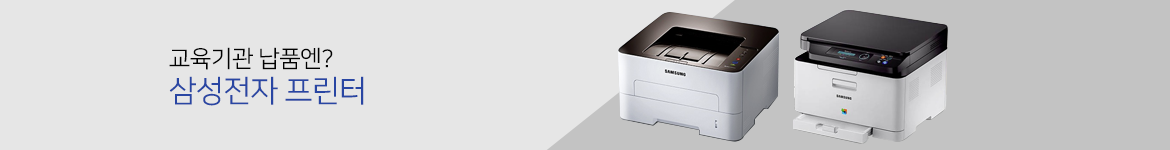
<style>
.page{position:relative;width:1170px;height:150px;background:#e6e6e6}
.page>*{position:absolute;margin:0}
.t1{font:23.6px "NanumSquareR";letter-spacing:-0.025em;color:#010101}
.t2{font:30.6px "NanumSquareR";letter-spacing:-0.025em;color:#2946a3}
</style>
<div class="page">
<p class="t1" style="left:169px;top:47px;width:164px;height:23px">교육기관 납품엔?</p>
<p class="t2" style="left:169px;top:76px;width:195px;height:30px">삼성전자 프린터</p>
</div>
